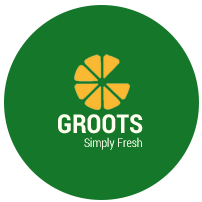
<style>
.page{position:relative;width:202px;height:202px;background:#157729}
.page>*{position:absolute;margin:0}
.t1{font:26px "RobotoCondensed-Bold";color:#fffff0}
.t2{font:12px "RobotoCondensed-Light";color:#fffff0}
</style>
<div class="page">
<p class="t1" style="left:57px;top:106px;width:86px;height:34px">GROOTS</p>
<p class="t2" style="left:84px;top:134px;width:59px;height:16px">Simply Fresh</p>
</div>
